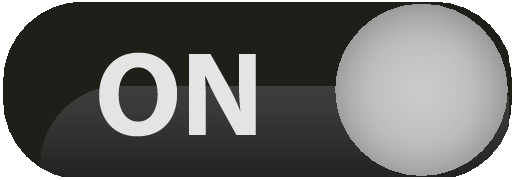
<style>
.page{position:relative;width:512px;height:180px;background:#1f1f19}
.page>*{position:absolute;margin:0}
.t1{font:120px "MyriadPro-Bold";color:#e4e4e4}
</style>
<div class="page">
<p class="t1" style="left:99px;top:52px;width:157px;height:85px">ON</p>
</div>
